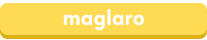
<style>
.page{position:relative;width:207px;height:40px;background:#ffda52}
.page>*{position:absolute;margin:0}
.t1{font:22px "Linotte-Bold";color:#ffffff}
</style>
<div class="page">
<p class="t1" style="left:63px;top:9px;width:81px;height:22px">maglaro</p>
</div>
